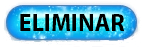
<style>
.page{position:relative;width:142px;height:47px}
.page>*{position:absolute;margin:0}
.t1{font:24px "MyriadPro-Bold";color:#000000}
</style>
<div class="page">
<p class="t1" style="left:20px;top:14px;width:105px;height:17px">ELIMINAR</p>
</div>
